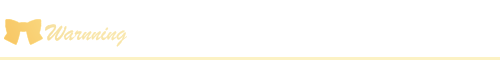
<style>
.page{position:relative;width:500px;height:60px;background:#ffffff}
.page>*{position:absolute;margin:0}
.t1{font:26px "BrushScriptMT";color:#f8e4a8}
</style>
<div class="page">
<p class="t1" style="left:45px;top:24px;width:82px;height:23px">Warnning</p>
</div>
